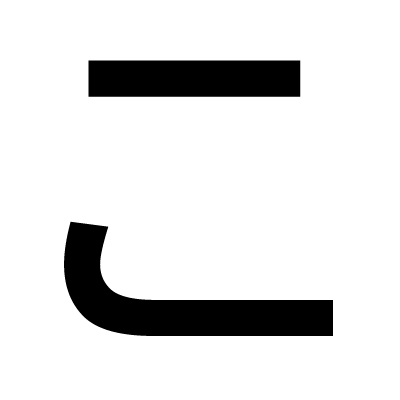
<style>
.page{position:relative;width:400px;height:400px;background:#ffffff}
.page>*{position:absolute;margin:0}
.t1{font:416.7px "MS-PGothic";color:#000000}
</style>
<div class="page">
<p class="t1" style="left:64px;top:60px;width:269px;height:276px">こ</p>
</div>
